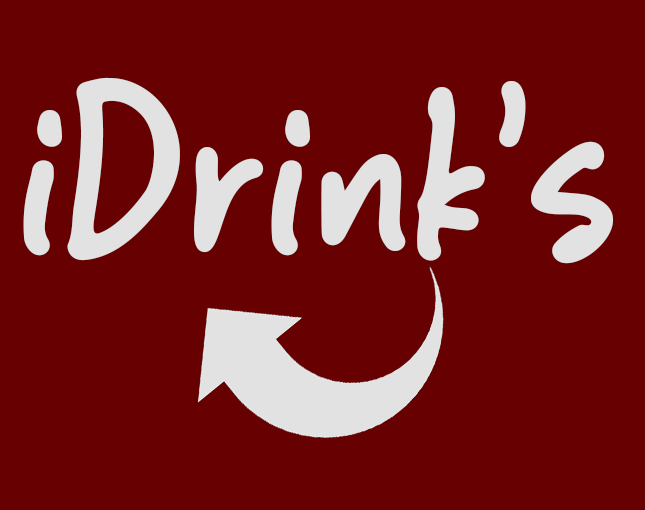
<style>
.page{position:relative;width:645px;height:510px;background:#670000}
.page>*{position:absolute;margin:0}
.t1{font:300px "Notebook";color:#e2e2e2}
</style>
<div class="page">
<p class="t1" style="left:23px;top:77px;width:591px;height:187px">iDrink's</p>
</div>
